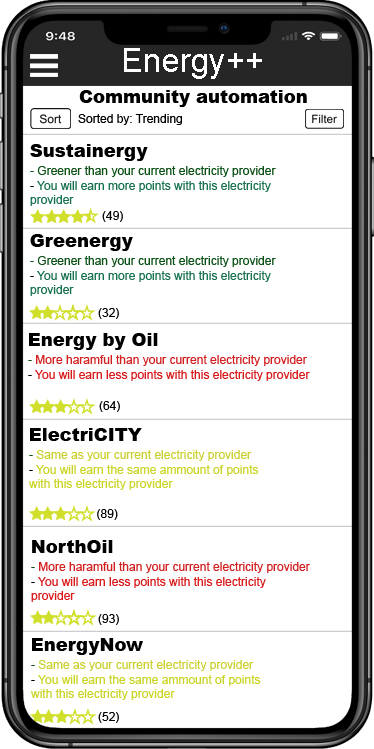
<style>
.page{position:relative;width:374px;height:749px;background:#ffffff}
.page>*{position:absolute;margin:0}
.t1{font:33.1px "ArialMT";color:#ffffff}
.t2{font:18px "Arial-Black";color:#000000}
.t3{font:12px "ArialMT";color:#000000}
.t4{font:12px "ArialMT";color:#18724e}
.t5{font:12px "ArialMT";color:#0c5217}
.t6{font:12px "ArialMT";color:#d91b1b}
.t7{font:12px "ArialMT";color:#d32121}
.t8{font:12px "ArialMT";color:#cad425}
.t9{font:12px "ArialMT";color:#cad030}
</style>
<div class="page">
<p class="t1" style="left:124px;top:48px;width:138px;height:31px">Energy++</p>
<p class="t2" style="left:79px;top:90px;width:228px;height:17px">Community automation</p>
<p class="t3" style="left:78px;top:114px;width:104px;height:11px">Sorted by: Trending</p>
<p class="t2" style="left:30px;top:144px;width:118px;height:17px">Sustainergy</p>
<p class="t4" style="left:30px;top:166px;width:246px;height:40px"><span class="t5">- Greener than your current electricity provider<br></span><span class="t3">- </span>You will earn more points with this electricity provider</p>
<p class="t3" style="left:102px;top:211px;width:21px;height:11px">(49)</p>
<p class="t2" style="left:30px;top:234px;width:103px;height:17px">Greenergy</p>
<p class="t4" style="left:30px;top:256px;width:246px;height:40px"><span class="t5">- Greener than your current electricity provider<br></span><span class="t3">- </span>You will earn more points with this electricity provider</p>
<p class="t3" style="left:98px;top:308px;width:21px;height:11px">(32)</p>
<p class="t2" style="left:29px;top:333px;width:129px;height:17px">Energy by Oil</p>
<p class="t6" style="left:28px;top:355px;width:282px;height:26px"><span class="t5">- </span><span class="t7">More haramful than your current electricity provider<br></span><span class="t3">- </span>You will earn less points with this electricity provider</p>
<p class="t3" style="left:99px;top:401px;width:21px;height:11px">(64)</p>
<p class="t2" style="left:30px;top:428px;width:112px;height:13px">ElectriCITY</p>
<p class="t8" style="left:29px;top:450px;width:230px;height:40px"><span class="t5">- </span><span class="t9">Same as your current electricity provider<br></span><span class="t3">- </span>You will earn the same ammount of points with this electricity provider</p>
<p class="t3" style="left:97px;top:509px;width:21px;height:11px">(89)</p>
<p class="t2" style="left:32px;top:540px;width:81px;height:13px">NorthOil</p>
<p class="t6" style="left:31px;top:562px;width:279px;height:40px"><span class="t5">- </span><span class="t7">More haramful than your current electricity provider<br></span><span class="t3">- </span>You will earn less points with this electricity provider</p>
<p class="t3" style="left:98px;top:614px;width:21px;height:11px">(93)</p>
<p class="t2" style="left:32px;top:638px;width:111px;height:17px">EnergyNow</p>
<p class="t8" style="left:31px;top:660px;width:230px;height:40px"><span class="t5">- </span><span class="t9">Same as your current electricity provider<br></span><span class="t3">- </span>You will earn the same ammount of points with this electricity provider</p>
<p class="t3" style="left:98px;top:712px;width:21px;height:11px">(52)</p>
</div>
